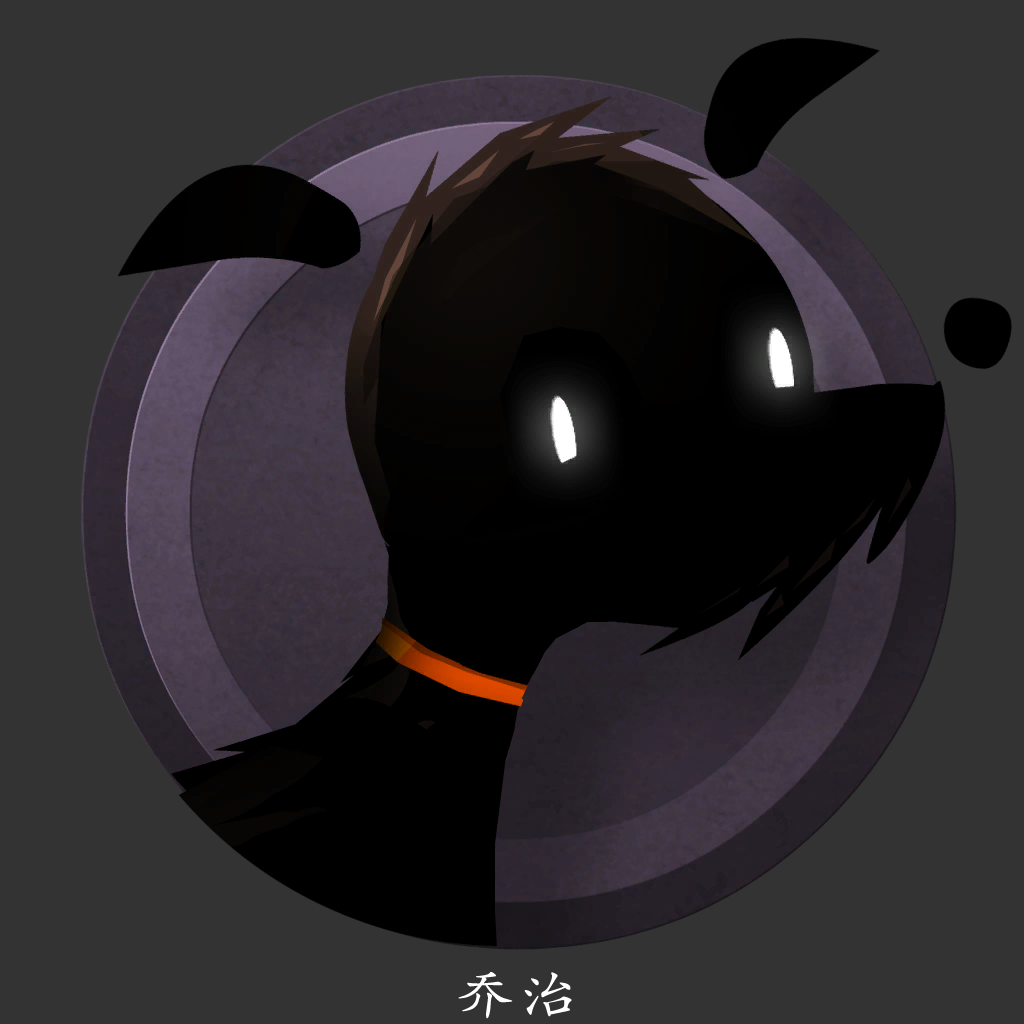
<style>
.page{position:relative;width:1024px;height:1024px;background:#333333}
.page>*{position:absolute;margin:0}
.t1{font:53.3px "STKaiti";letter-spacing:0.1em;color:#ffffff}
</style>
<div class="page">
<p class="t1" style="left:458px;top:972px;width:114px;height:47px">乔治</p>
</div>
